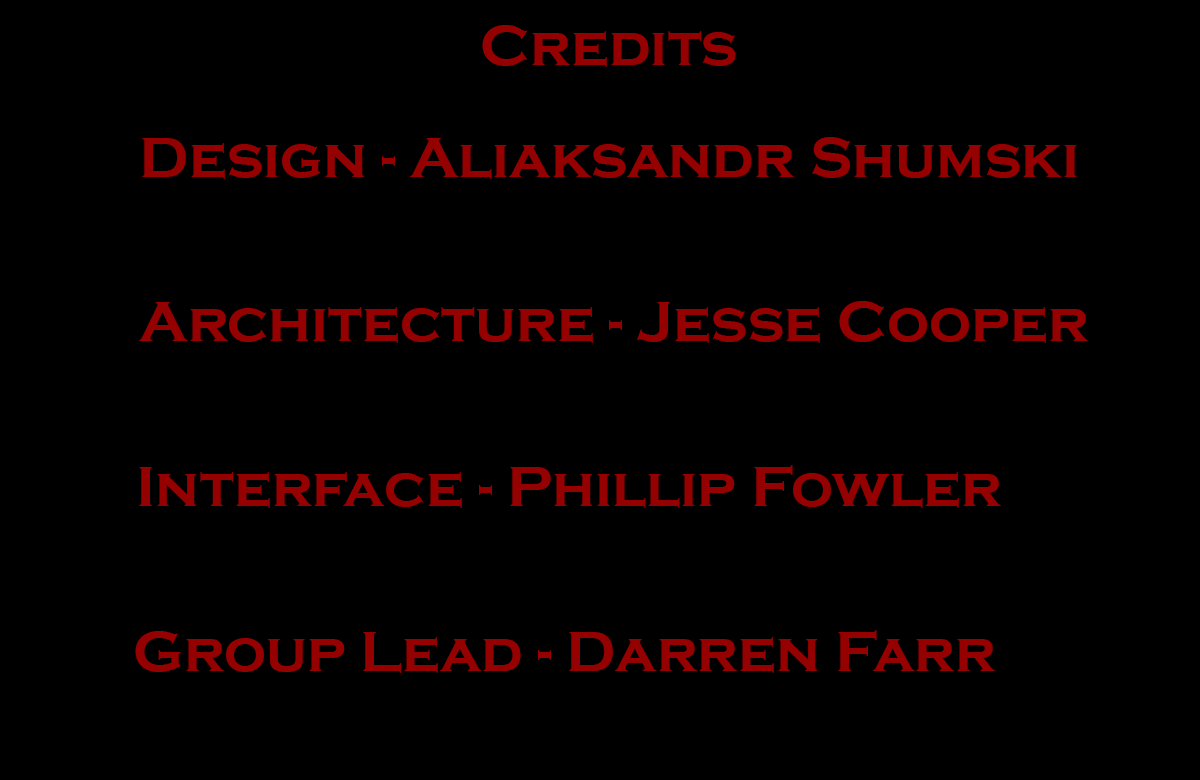
<style>
.page{position:relative;width:1200px;height:780px;background:#000000}
.page>*{position:absolute;margin:0}
.t1{font:59.3px "CopperplateGothic-Bold";color:#950000}
</style>
<div class="page">
<p class="t1" style="left:482px;top:25px;width:254px;height:42px">Credits</p>
<p class="t1" style="left:142px;top:137px;width:935px;height:42px">Design - Aliaksandr Shumski</p>
<p class="t1" style="left:139px;top:301px;width:949px;height:42px">Architecture - Jesse Cooper</p>
<p class="t1" style="left:139px;top:465px;width:862px;height:43px">Interface - Phillip Fowler</p>
<p class="t1" style="left:135px;top:630px;width:860px;height:43px">Group Lead - Darren Farr</p>
</div>
